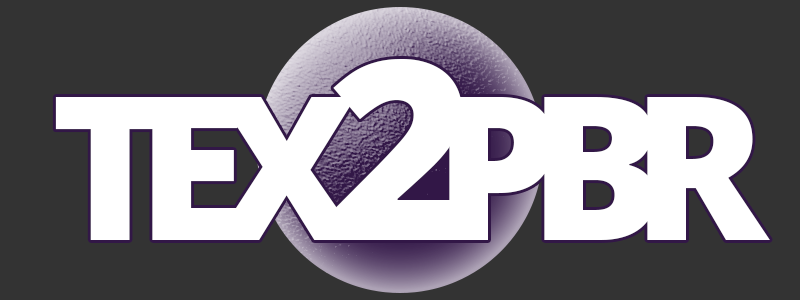
<style>
.page{position:relative;width:800px;height:300px;background:#333333}
.page>*{position:absolute;margin:0}
.t1{font:200px "OpenSans-Extrabold";letter-spacing:-0.16em;color:#ffffff}
.t2{font:250px "OpenSans-Extrabold";letter-spacing:-0.16em;color:#ffffff}
</style>
<div class="page">
<p class="t1" style="left:55px;top:59px;width:715px;height:181px">TEX<span class="t2">2</span>PBR</p>
</div>
